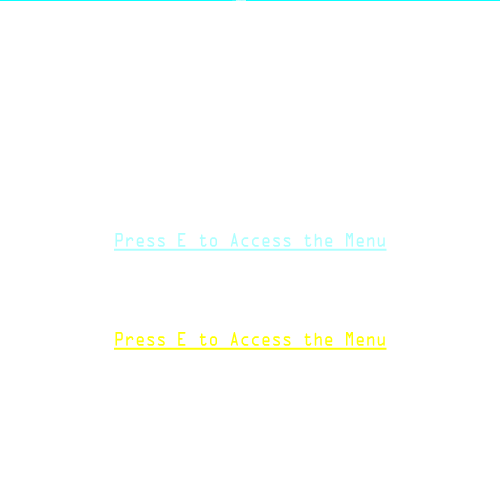
<style>
.page{position:relative;width:500px;height:500px;background:#ffffff}
.page>*{position:absolute;margin:0}
.t1{font:17.7px "OCRAStd";text-decoration:underline;scale:0.82 1}
</style>
<div class="page">
<p class="t1" style="left:114px;top:232px;width:273px;height:18px">Press E to Access the Menu</p>
</div>
